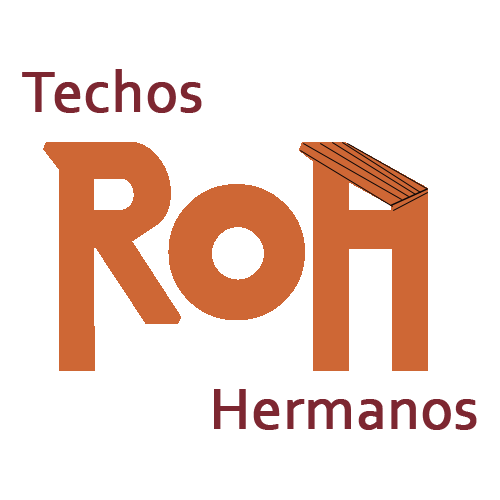
<style>
.page{position:relative;width:500px;height:500px;background:#ffffff}
.page>*{position:absolute;margin:0}
.t1{font:60px "Corbel";color:#7d2731;font-weight:bold}
</style>
<div class="page">
<p class="t1" style="left:22px;top:69px;width:180px;height:44px">Techos</p>
<p class="t1" style="left:214px;top:389px;width:263px;height:41px">Hermanos</p>
</div>
